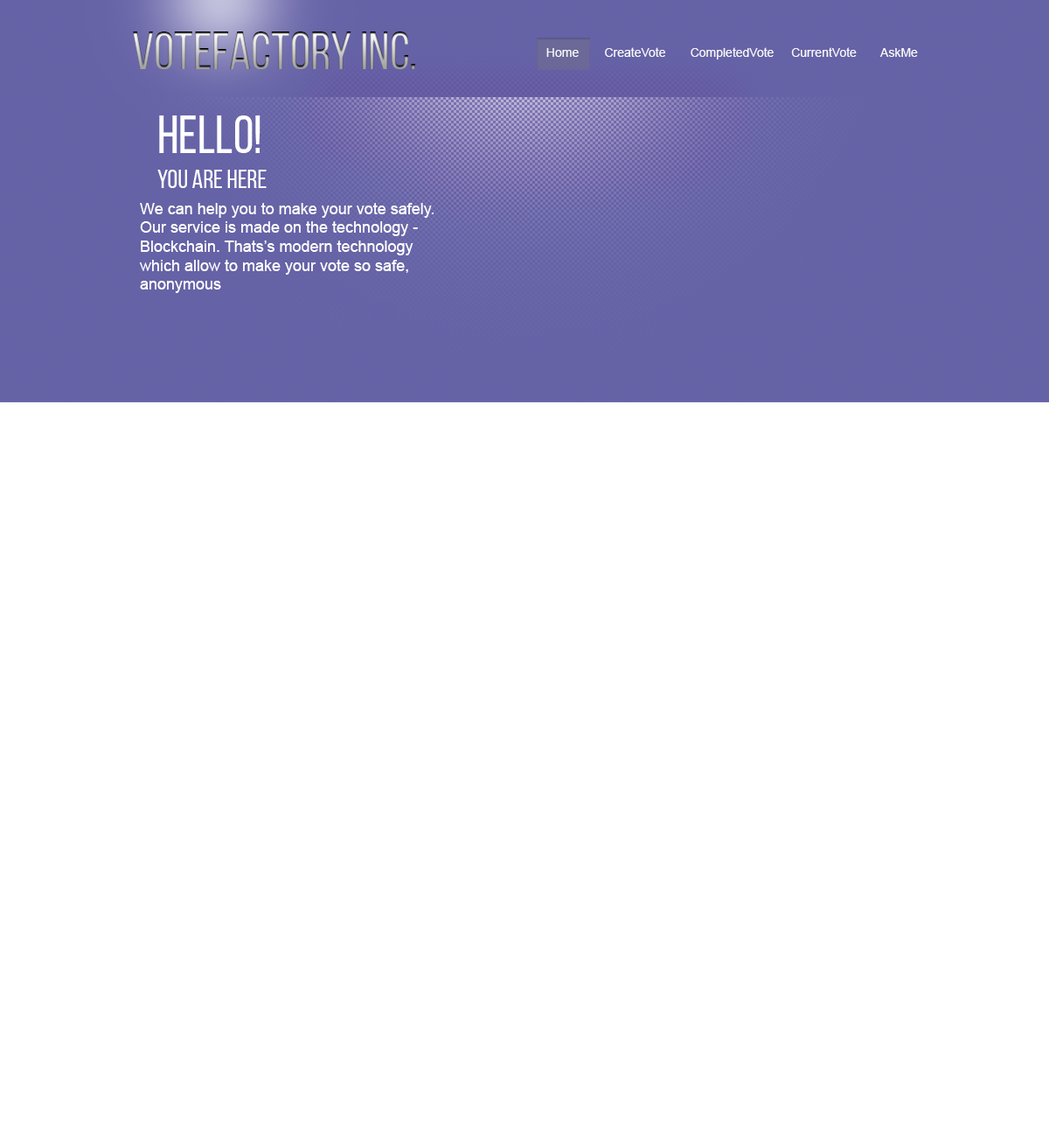
<style>
.page{position:relative;width:1049px;height:1137px;background:#ffffff}
.page>*{position:absolute;margin:0}
.t1{font:52.5px "BebasNeueRegular"}
.t2{font:12.2px "ArialMT";color:#f8f7fa}
.t3{font:52.5px "BebasNeueRegular";color:#ffffff}
.t4{font:26.2px "BebasNeueRegular";color:#ffffff}
.t5{font:15.7px "ArialMT";color:#ffffff}
</style>
<div class="page">
<p class="t1" style="left:133px;top:31px;width:282px;height:38px">Votefactory inc.</p>
<p class="t2" style="left:546px;top:48px;width:33px;height:9px">Home</p>
<p class="t2" style="left:605px;top:47px;width:60px;height:10px">CreateVote</p>
<p class="t2" style="left:691px;top:47px;width:83px;height:12px">CompletedVote</p>
<p class="t2" style="left:791px;top:47px;width:66px;height:10px">CurrentVote</p>
<p class="t2" style="left:880px;top:48px;width:38px;height:9px">AskMe</p>
<p class="t3" style="left:159px;top:115px;width:102px;height:38px">Hello!</p>
<p class="t4" style="left:157px;top:170px;width:110px;height:18px">You are here</p>
<p class="t5" style="left:139px;top:203px;width:295px;height:90px;text-align:right">We can help you to make your vote safely. Our service is made on the technology - Blockchain. Thats’s modern technology which allow to make your vote so safe, anonymous</p>
</div>
